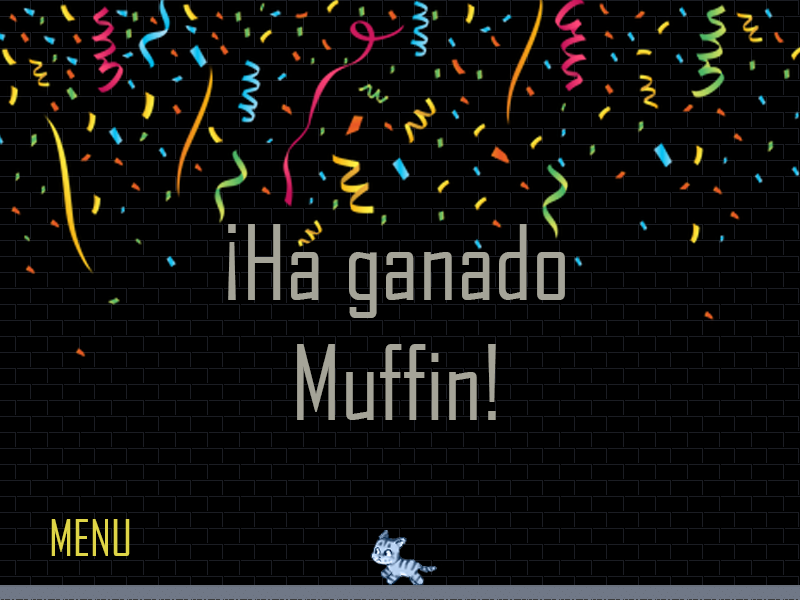
<style>
.page{position:relative;width:800px;height:600px;background:#000000}
.page>*{position:absolute;margin:0}
.t1{font:100px "AgencyFB-Reg";color:#a5a498}
.t2{font:48px "AgencyFB-Reg";color:#dfd547}
</style>
<div class="page">
<p class="t1" style="left:228px;top:224px;width:337px;height:196px;text-align:center">¡Ha ganado <br>Muffin!</p>
<p class="t2" style="left:51px;top:519px;width:79px;height:37px">MENU</p>
</div>
